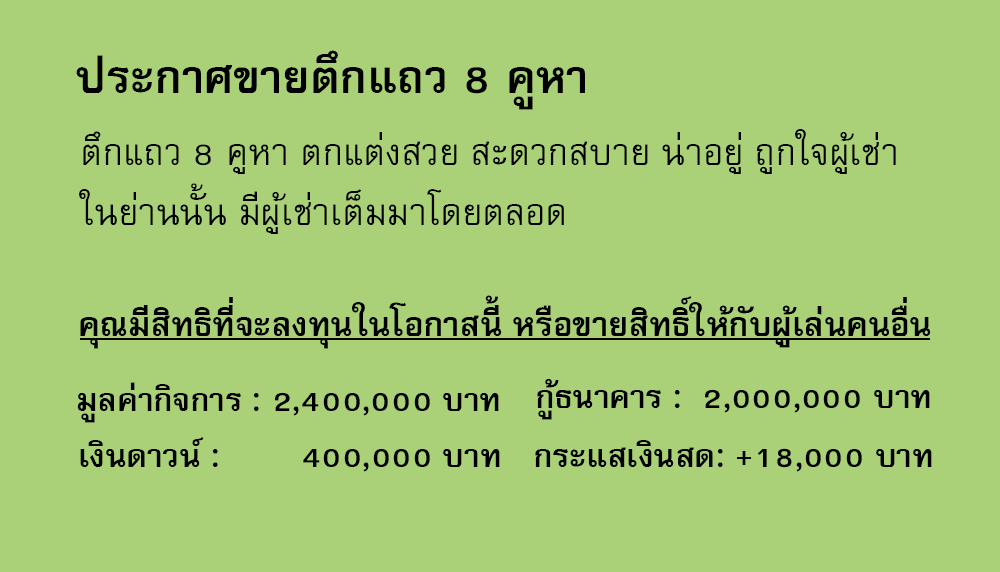
<style>
.page{position:relative;width:1000px;height:572px;background:#aad178}
.page>*{position:absolute;margin:0}
.t1{font:64px "FreesiaUPCBold";color:#000000}
.t2{font:51px/60px "FreesiaUPC";color:#000000}
.t3{font:47px "FreesiaUPCBold";color:#000000}
.t4{font:45px "FreesiaUPCBold";color:#000000}
</style>
<div class="page">
<p class="t1" style="left:76px;top:50px;width:509px;height:60px">ประกาศขายตึกแถว 8 คูหา</p>
<p class="t2" style="left:79px;top:129px;width:817px;height:105px">ตึกแถว 8 คูหา ตกแต่งสวย สะดวกสบาย น่าอยู่ ถูกใจผู้เช่า<br>ในย่านนั้น มีผู้เช่าเต็มมาโดยตลอด</p>
<p class="t3" style="left:80px;top:295px;width:851px;height:54px">คุณมีสิทธิที่จะลงทุนในโอกาสนี้ หรือขายสิทธิ์ให้กับผู้เล่นคนอื่น</p>
<p class="t4" style="left:77px;top:382px;width:422px;height:41px">มูลค่ากิจการ : 2,400,000 บาท</p>
<p class="t4" style="left:537px;top:379px;width:393px;height:41px">กู้ธนาคาร :  2,000,000 บาท</p>
<p class="t4" style="left:80px;top:436px;width:420px;height:36px">เงินดาวน์ :        400,000 บาท</p>
<p class="t4" style="left:535px;top:440px;width:397px;height:32px">กระแสเงินสด: +18,000 บาท</p>
</div>
